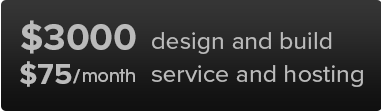
<style>
.page{position:relative;width:381px;height:111px}
.page>*{position:absolute;margin:0}
.t1{font:38px "ProximaNova-Bold";color:#bbbbbb}
.t2{font:25px "ProximaNova-Regular";color:#bbbbbb}
.t3{font:30px "ProximaNova-Bold";color:#bbbbbb}
.t4{font:17px "ITCAvantGardeStd-Md";color:#bbbbbb}
</style>
<div class="page">
<p class="t1" style="left:21px;top:20px;width:115px;height:34px">$3000</p>
<p class="t2" style="left:152px;top:32px;width:180px;height:22px">design and build</p>
<p class="t3" style="left:20px;top:61px;width:52px;height:26px">$75</p>
<p class="t2" style="left:152px;top:65px;width:211px;height:22px">service and hosting</p>
<p class="t4" style="left:73px;top:69px;width:62px;height:15px">/month</p>
</div>
